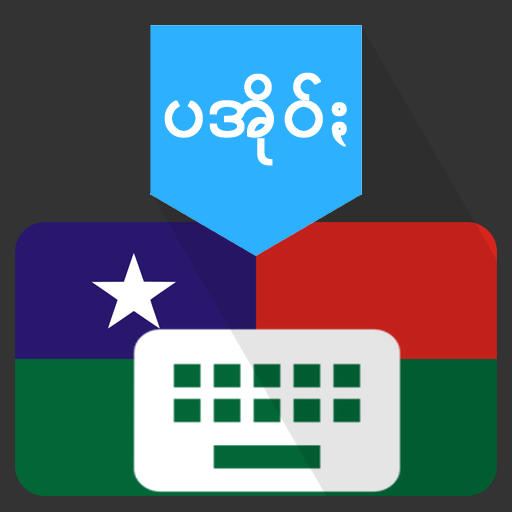
<style>
.page{position:relative;width:512px;height:512px;background:#333333}
.page>*{position:absolute;margin:0}
.t1{font:66.7px "ZawgyiPaOhHi";color:#ffffff;font-weight:bold}
</style>
<div class="page">
<p class="t1" style="left:164px;top:72px;width:183px;height:94px">ပအိုဝ္ၒ</p>
</div>
